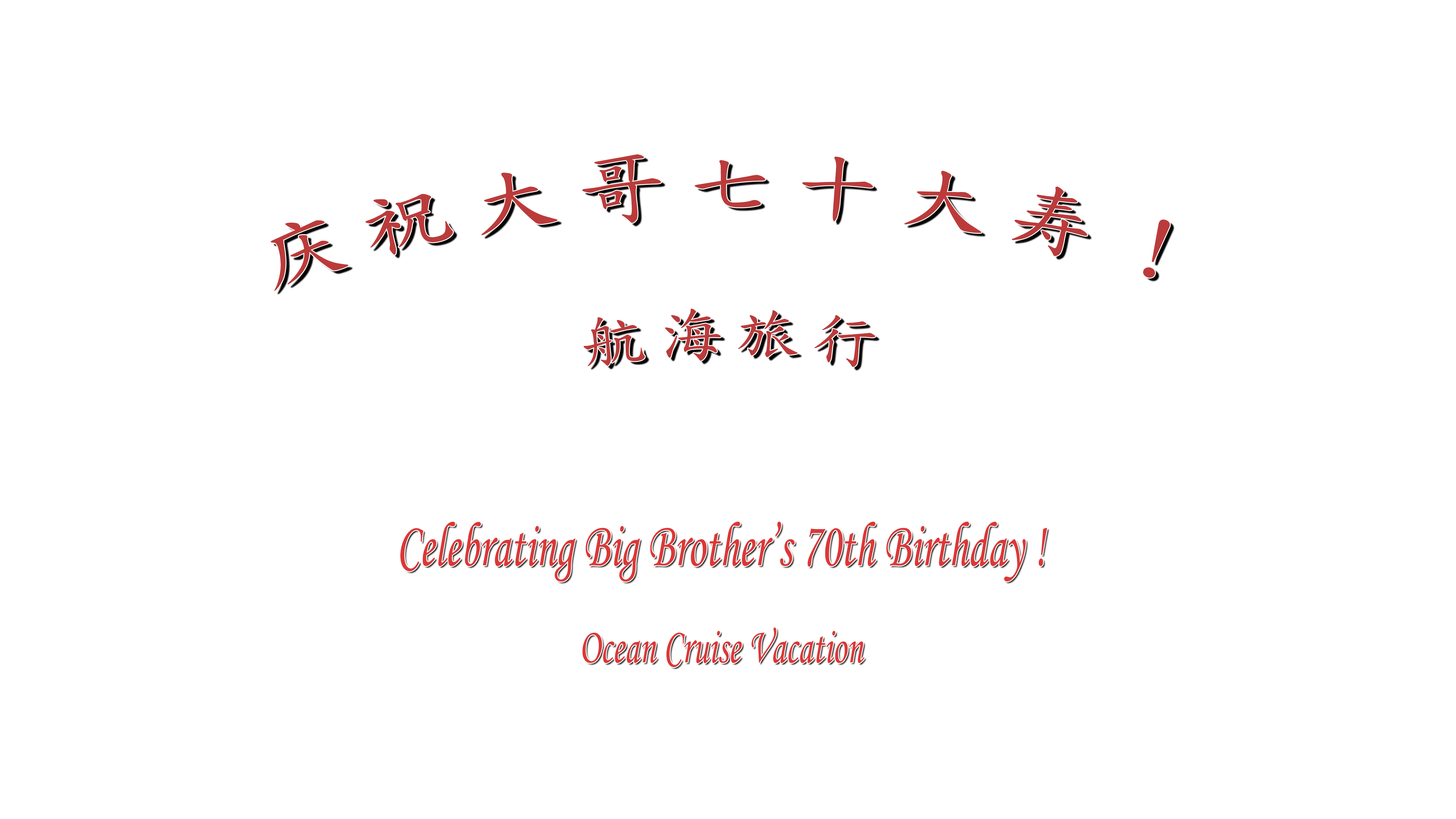
<style>
.page{position:relative;width:1456px;height:819px;background:#ffffff}
.page>*{position:absolute;margin:0}
.t1{font:75.8px "DFKaiShu-SB-Estd-BF";letter-spacing:0.2em;color:#bb3b3b}
.t2{font:60.7px "DFKaiShu-SB-Estd-BF";letter-spacing:0.2em;color:#bb3b3b}
.t3{font:63.2px "MonotypeCorsiva";color:#db3838;scale:0.7 1}
.t4{font:50.6px "MonotypeCorsiva";color:#db3838;scale:0.7 1}
</style>
<div class="page">
<p class="t1" style="left:271px;top:154px;width:899px;height:213px;text-align:center">庆祝大哥七十大寿！<br><span class="t2"><br>航海旅行</span></p>
<p class="t3" style="left:400px;top:521px;width:647px;height:146px;text-align:center">Celebrating Big Brother’s 70th Birthday !<br><br><span class="t4">Ocean Cruise Vacation</span></p>
</div>
